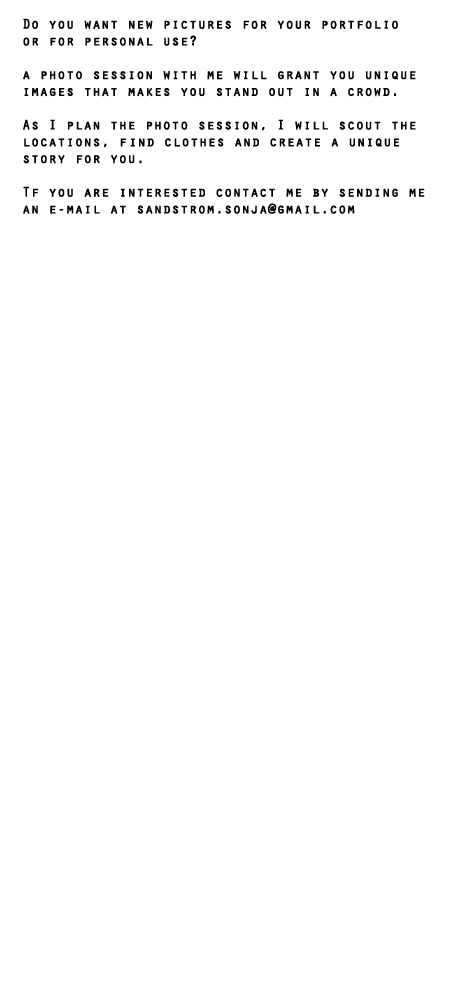
<style>
.page{position:relative;width:450px;height:1000px;background:#ffffff}
.page>*{position:absolute;margin:0}
.t1{font:14px "OratorStd";color:#000000;font-weight:bold}
</style>
<div class="page">
<p class="t1" style="left:23px;top:18px;width:402px;height:196px">Do you want new pictures for your portfolio <br>or for personal use? <br><br>a photo session with me will grant you unique <br>images that makes you stand out in a crowd. <br><br>As I plan the photo session, I will scout the<br>locations, f ind clothes and create a unique <br>story for you.<br><br>Tf you are interested contact me by sending me <br>an e-mail at sandstrom.sonja@gmail.com</p>
</div>
